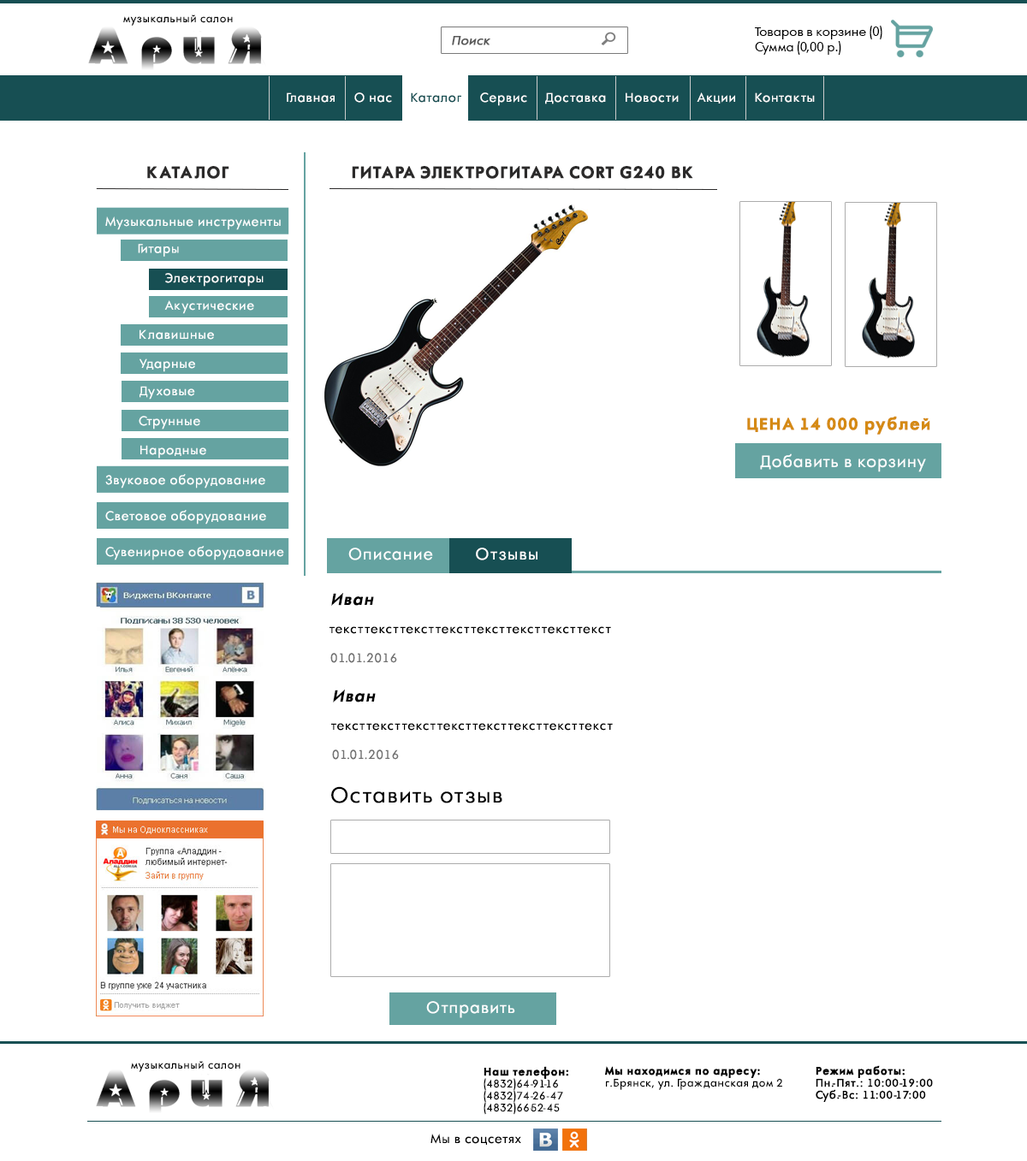
<style>
.page{position:relative;width:1027px;height:1161px;background:#ffffff}
.page>*{position:absolute;margin:0}
.t1{font:10.3px "AFuturaOrto";letter-spacing:0.05em;color:#000000}
.t2{font:12px/15.4px "AFuturaOrto";color:#000000}
.t3{font:12px "AFuturaOrto";color:#595959;font-weight:bold;font-style:italic}
.t4{font:12px "AFuturaOrto";letter-spacing:0.05em;color:#ffffff}
.t5{font:12px "AFuturaOrto";letter-spacing:0.05em;color:#174f53}
.t6{font:15.4px "AFuturaOrtoBold";letter-spacing:0.05em;color:#2b2a2a;text-transform:uppercase;font-weight:bold}
.t7{font:15.4px "AFuturaOrtoBold";letter-spacing:0.05em;color:#d58a14;font-weight:bold}
.t8{font:15.4px "AFuturaOrto";letter-spacing:0.05em;color:#ffffff}
.t9{font:15.4px "AFuturaOrtoBold";letter-spacing:0.05em;color:#000000;font-style:italic}
.t10{font:12px "AFuturaOrto";letter-spacing:0.05em;color:#000000}
.t11{font:12px "AFuturaOrto";letter-spacing:0.05em;color:#717171}
.t12{font:20.5px "AFuturaOrto";letter-spacing:0.05em;color:#000000}
.t13{font:10.3px/12px "AFuturaOrto";letter-spacing:0.05em;color:#000000}
.t14{font:10.3px/12px "AFuturaOrtoBold";letter-spacing:0.05em;color:#000000;font-weight:bold}
.t15{font:10.3px/12px "AFuturaOrto";letter-spacing:0.05em;color:#000000;font-weight:bold}
</style>
<div class="page">
<p class="t1" style="left:123px;top:15px;width:110px;height:11px">музыкальный салон</p>
<p class="t2" style="left:755px;top:26px;width:127px;height:29px">Товаров в корзине (0)<br>Сумма (0,00 р.)</p>
<p class="t3" style="left:452px;top:36px;width:38px;height:9px">Поиск</p>
<p class="t4" style="left:287px;top:92px;width:528px;height:14px">Главная     О нас  <span class="t5">   Каталог </span>    Сервис     Доставка     Новости     Акции     Контакты</p>
<p class="t6" style="left:147px;top:166px;width:82px;height:13px">каталог</p>
<p class="t6" style="left:352px;top:166px;width:341px;height:13px">Гитара электрогитара Cort G240 BK</p>
<p class="t4" style="left:105px;top:216px;width:176px;height:14px">Музыкальные инструменты</p>
<p class="t4" style="left:138px;top:244px;width:41px;height:13px">Гитары</p>
<p class="t4" style="left:165px;top:273px;width:99px;height:14px">Электрогитары</p>
<p class="t4" style="left:164px;top:300px;width:90px;height:14px">Акустические</p>
<p class="t4" style="left:139px;top:329px;width:75px;height:11px">Клавишные</p>
<p class="t4" style="left:139px;top:359px;width:56px;height:13px">Ударные</p>
<p class="t4" style="left:139px;top:386px;width:56px;height:14px">Духовые</p>
<p class="t4" style="left:139px;top:416px;width:61px;height:14px">Струнные</p>
<p class="t7" style="left:747px;top:416px;width:183px;height:19px">ЦЕНА 14 000 рублей</p>
<p class="t4" style="left:140px;top:445px;width:66px;height:14px">Народные</p>
<p class="t8" style="left:760px;top:454px;width:166px;height:18px">Добавить в корзину</p>
<p class="t4" style="left:105px;top:474px;width:160px;height:15px">Звуковое оборудование</p>
<p class="t4" style="left:105px;top:510px;width:161px;height:15px">Световое оборудование</p>
<p class="t4" style="left:105px;top:546px;width:179px;height:15px">Сувенирное оборудование</p>
<p class="t8" style="left:348px;top:548px;width:189px;height:13px">Описание         Отзывы</p>
<p class="t9" style="left:331px;top:593px;width:43px;height:13px">Иван</p>
<p class="t10" style="left:329px;top:626px;width:282px;height:8px">тексттексттексттексттексттексттексттекст</p>
<p class="t11" style="left:330px;top:653px;width:67px;height:10px">01.01.2016</p>
<p class="t9" style="left:333px;top:690px;width:43px;height:13px">Иван</p>
<p class="t10" style="left:331px;top:723px;width:282px;height:8px">тексттексттексттексттексттексттексттекст</p>
<p class="t11" style="left:332px;top:750px;width:67px;height:10px">01.01.2016</p>
<p class="t12" style="left:331px;top:786px;width:171px;height:18px">Оставить отзыв</p>
<p class="t8" style="left:426px;top:1001px;width:89px;height:17px">Отправить</p>
<p class="t1" style="left:131px;top:1061px;width:109px;height:11px">музыкальный салон</p>
<p class="t13" style="left:483px;top:1066px;width:85px;height:49px"><span class="t14">Наш телефон:<br></span>(4832)64-91-16<br>(4832)74-26-47 <br>(4832)66-52-45</p>
<p class="t13" style="left:605px;top:1066px;width:177px;height:24px"><span class="t14">Мы находимся по адресу:<br></span>г.Брянск, ул. Гражданская дом 2</p>
<p class="t15" style="left:816px;top:1065px;width:117px;height:37px"><span class="t14">Режим работы:<br></span>Пн.-Пят.: 10:00-19:00<br>Суб.-Вс: 11:00-17:00</p>
<p class="t10" style="left:430px;top:1134px;width:91px;height:11px">Мы в соцсетях</p>
</div>
